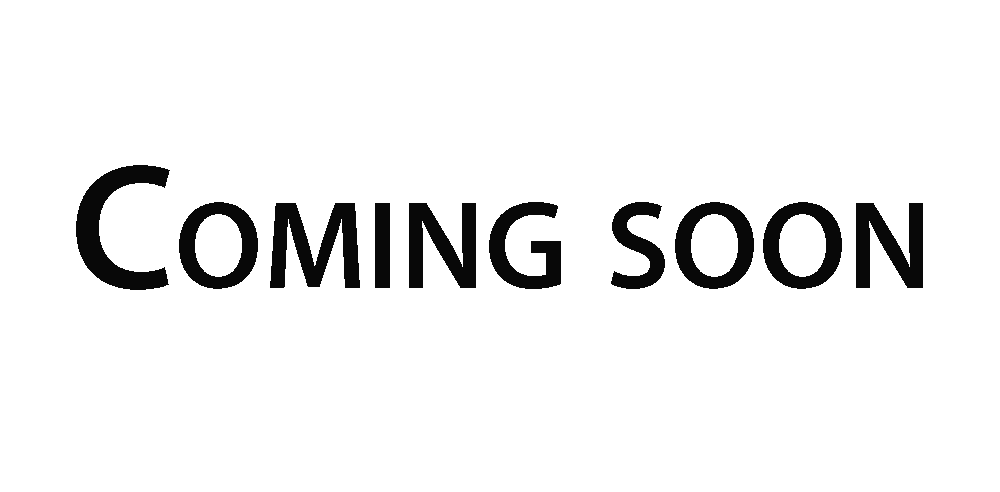
<style>
.page{position:relative;width:1000px;height:492px;background:#ffffff}
.page>*{position:absolute;margin:0}
.t1{font:179.2px "MyriadPro-Semibold";color:#080808;font-variant:small-caps}
</style>
<div class="page">
<p class="t1" style="left:76px;top:165px;width:847px;height:125px">Coming soon</p>
</div>
